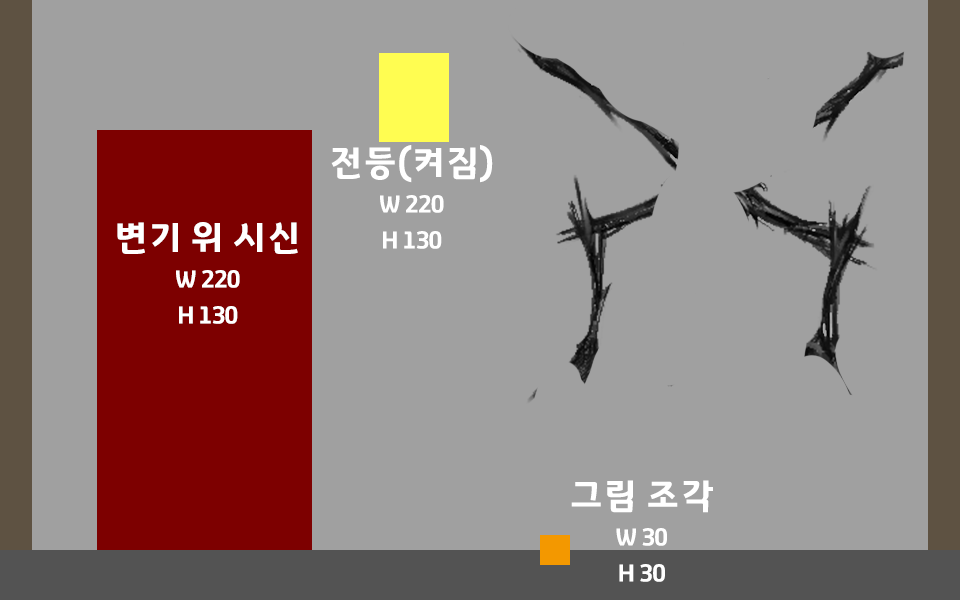
<style>
.page{position:relative;width:960px;height:600px;background:#a0a0a0}
.page>*{position:absolute;margin:0}
.t1{font:24px/36px "GyeonggiTitleV";letter-spacing:-0.05em;color:#ffffff}
.t2{font:36px/12px "GyeonggiTitleV";letter-spacing:-0.05em;color:#ffffff}
</style>
<div class="page">
<p class="t1" style="left:331px;top:145px;width:162px;height:104px;text-align:center"><span class="t2">전등(켜짐)<br><br><br><br></span>W 220<br>H 130</p>
<p class="t1" style="left:117px;top:222px;width:181px;height:102px;text-align:center"><span class="t2">변기 위 시신<br><br><br><br></span>W 220<br>H 130</p>
<p class="t1" style="left:571px;top:480px;width:142px;height:102px;text-align:center"><span class="t2">그림 조각<br><br><br><br></span>W 30<br>H 30</p>
</div>
